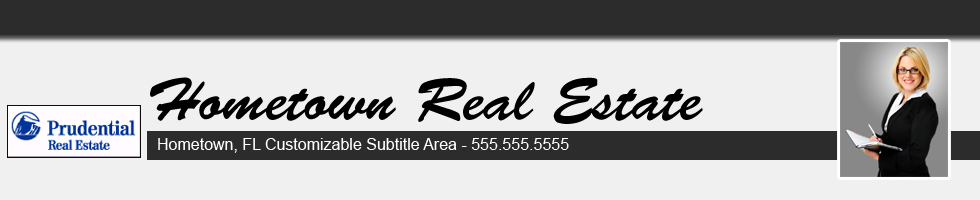
<style>
.page{position:relative;width:980px;height:200px;background:#f0f0f0}
.page>*{position:absolute;margin:0}
.t1{font:60px "BrushScriptStd";color:#000000}
.t2{font:16px "ArialMT";color:#ffffff}
</style>
<div class="page">
<p class="t1" style="left:150px;top:77px;width:553px;height:47px">Hometown Real Estate</p>
<p class="t2" style="left:158px;top:138px;width:411px;height:15px">Hometown, FL Customizable Subtitle Area - 555.555.5555</p>
</div>
